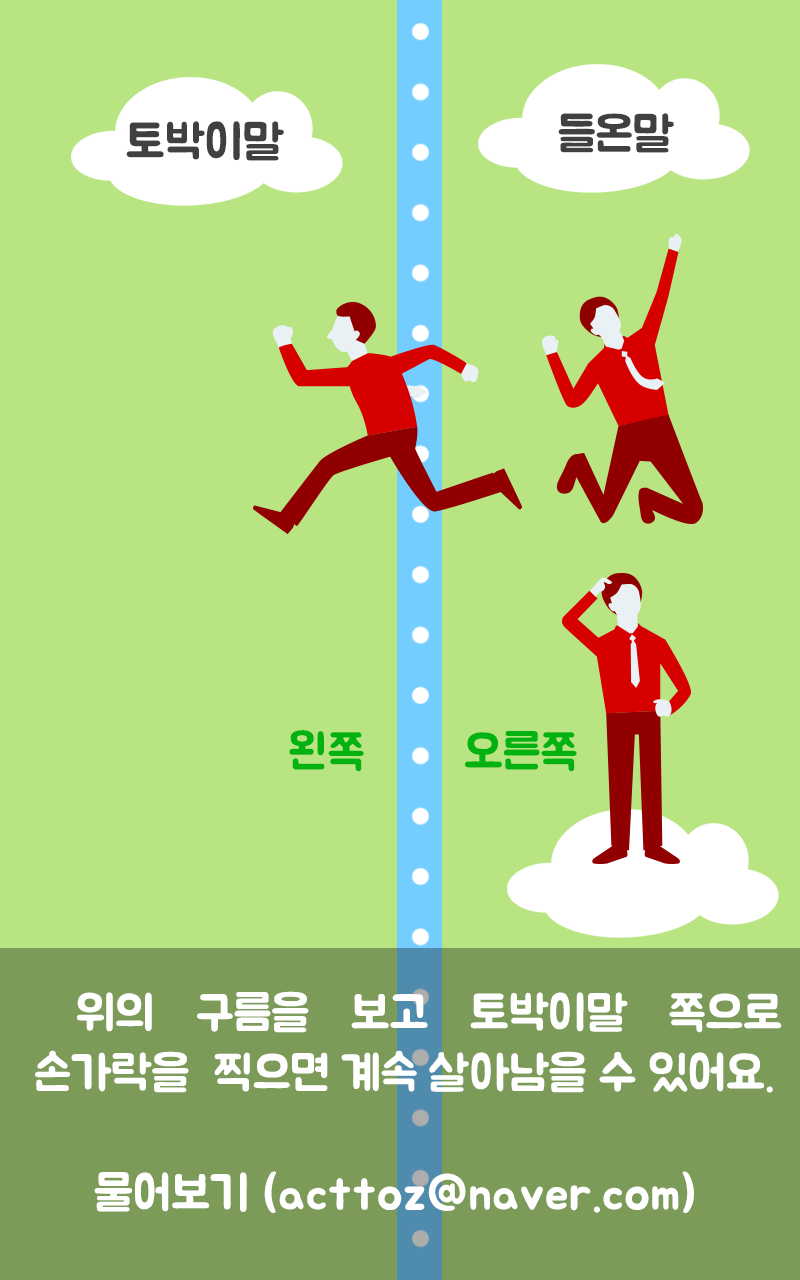
<style>
.page{position:relative;width:800px;height:1280px;background:#b8e482}
.page>*{position:absolute;margin:0}
.t1{font:47.8px "BMJUA";color:#404040}
.t2{font:47.8px "BMJUA";color:#01b211}
.t3{font:47.8px/60px "BMJUA";color:#ffffff}
</style>
<div class="page">
<p class="t1" style="left:558px;top:113px;width:116px;height:40px">들온말</p>
<p class="t1" style="left:126px;top:121px;width:158px;height:40px">토박이말</p>
<p class="t2" style="left:289px;top:730px;width:75px;height:42px">왼쪽</p>
<p class="t2" style="left:464px;top:731px;width:113px;height:41px">오른쪽</p>
<p class="t3" style="left:35px;top:991px;width:747px;height:222px;text-align:justify">위의 구름을 보고 토박이말 쪽으로 손가락을  찍으면 계속 살아남을 수 있어요.<br><br>     물어보기 (acttoz@naver.com)</p>
</div>
